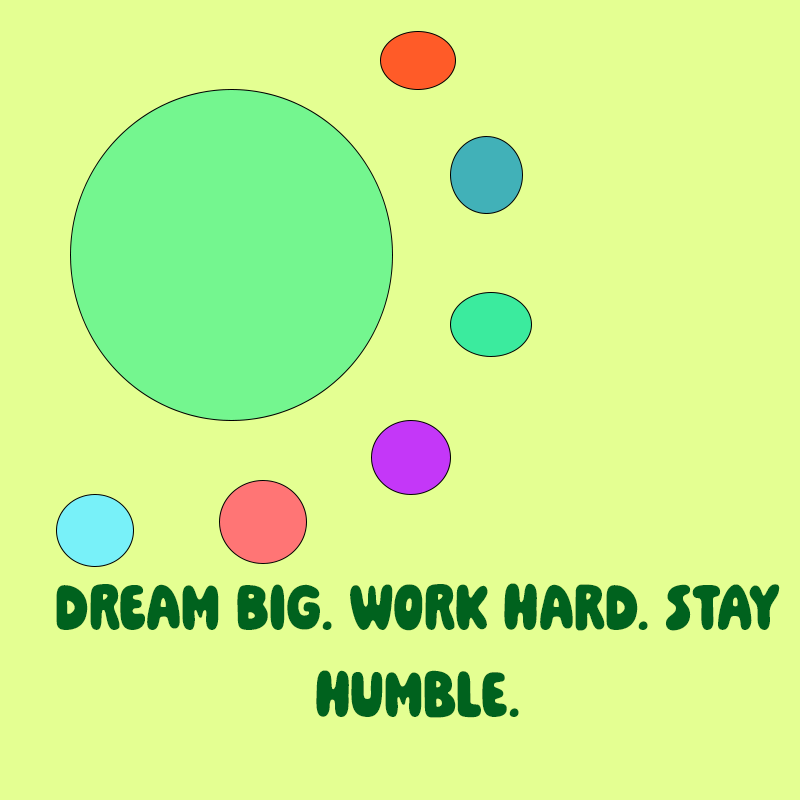
<style>
.page{position:relative;width:800px;height:800px;background:#e4ff92}
.page>*{position:absolute;margin:0}
.t1{font:72.9px "PaindeMie-Regular";color:#00621e}
</style>
<div class="page">
<p class="t1" style="left:56px;top:583px;width:724px;height:135px;text-align:center">Dream big. Work hard. Stay humble.</p>
</div>
